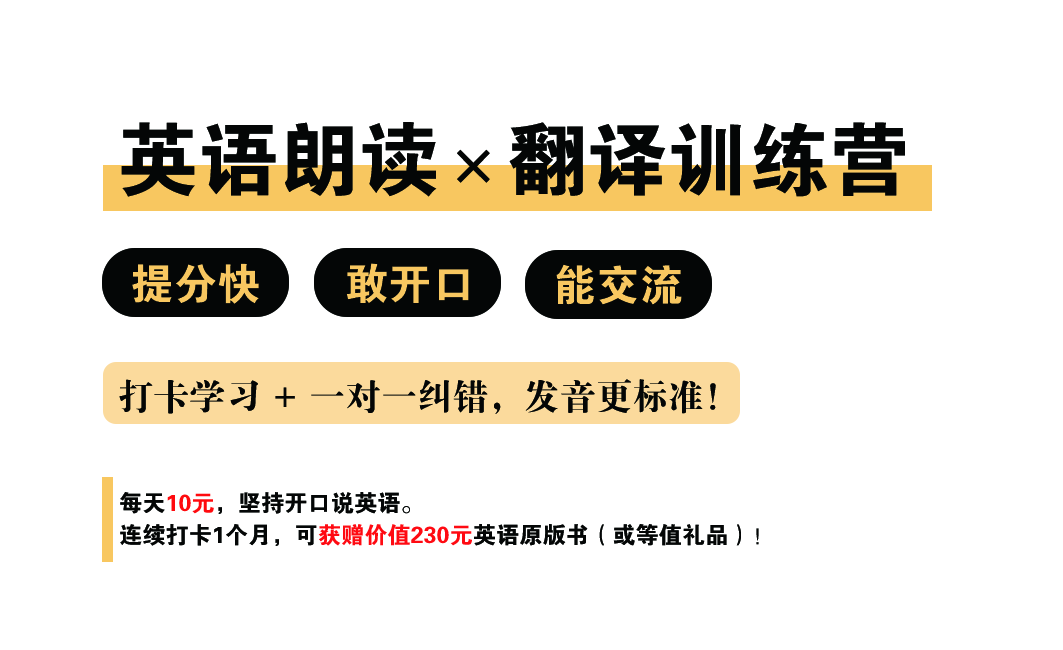
<style>
.page{position:relative;width:1063px;height:650px;background:#ffffff}
.page>*{position:absolute;margin:0}
.t1{font:80.7px "FZDHTK--GBK1-0";color:#040606}
.t2{font:66.7px "FZDBSJW--GB1-0";color:#040606}
.t3{font:43.3px "FZDHTK--GBK1-0";color:#f8c760}
.t4{font:35.9px "FZDBSJW--GB1-0";color:#040606}
.t5{font:23.2px/32.8px "FZDHTK--GBK1-0";color:#040606}
.t6{font:23.2px/32.8px "FZDHTK--GBK1-0";color:#ff0a0e}
.t7{font:23.2px/32.8px "FZDHTK--GBK1-0";color:#ff0a12}
</style>
<div class="page">
<p class="t1" style="left:121px;top:122px;width:784px;height:75px">英语朗读<span class="t2">×</span>翻译训练营</p>
<p class="t3" style="left:132px;top:263px;width:127px;height:41px">提分快</p>
<p class="t3" style="left:346px;top:263px;width:123px;height:41px">敢开口</p>
<p class="t3" style="left:556px;top:264px;width:126px;height:41px">能交流</p>
<p class="t4" style="left:119px;top:379px;width:597px;height:35px">打卡学习 + 一对一纠错，发音更标准！</p>
<p class="t5" style="left:120px;top:492px;width:639px;height:54px">每天<span class="t6">10元</span>，坚持开口说英语。<br>连续打卡1个月，可<span class="t7">获赠价值230元</span>英语原版书（或等值礼品）！</p>
</div>
